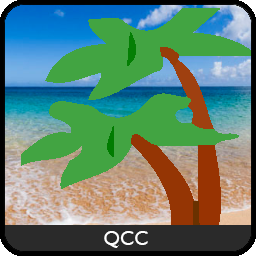
<style>
.page{position:relative;width:256px;height:256px;background:#42a442}
.page>*{position:absolute;margin:0}
.t1{font:20px "GillSansMT";color:#ffffff}
</style>
<div class="page">
<p class="t1" style="left:104px;top:231px;width:44px;height:17px">QCC</p>
</div>
